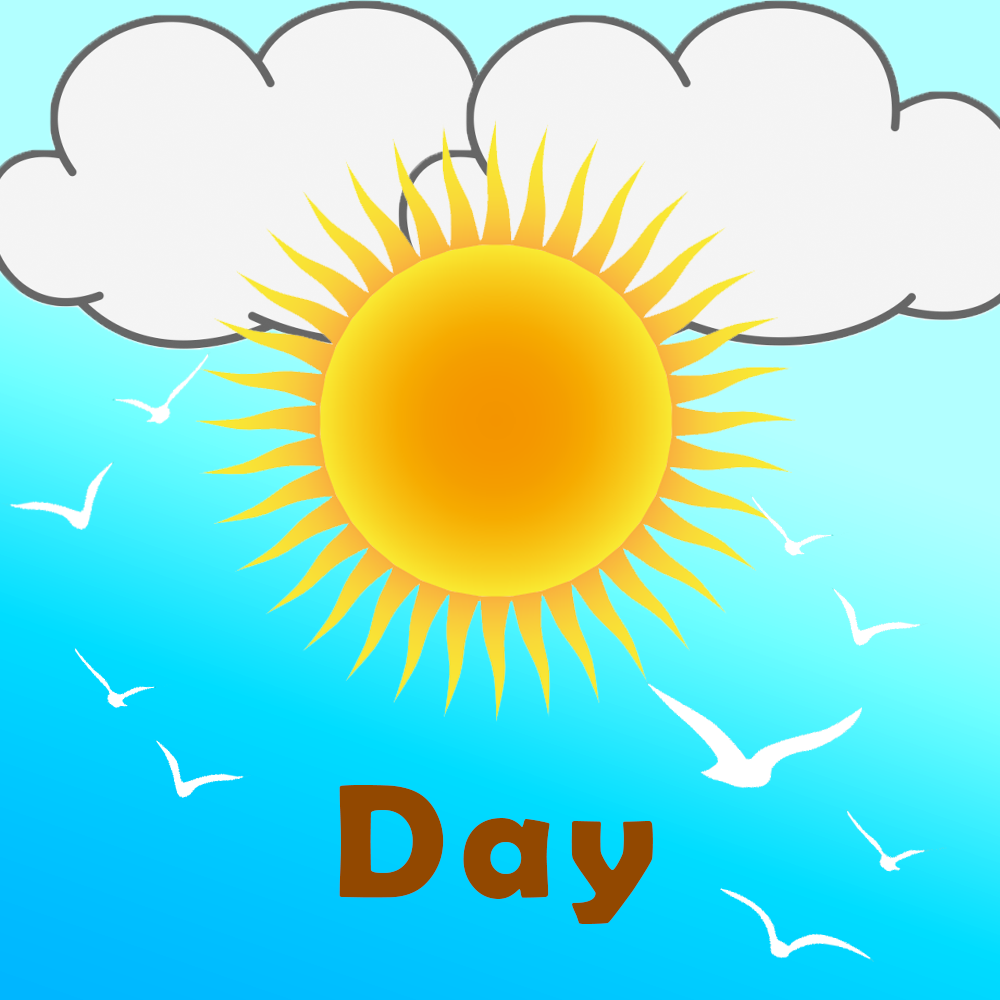
<style>
.page{position:relative;width:1000px;height:1000px}
.page>*{position:absolute;margin:0}
.t1{font:163.1px "BerlinSansFBDemi-Bold";letter-spacing:0.075em;color:#924800}
</style>
<div class="page">
<p class="t1" style="left:339px;top:785px;width:314px;height:139px">Day</p>
</div>
